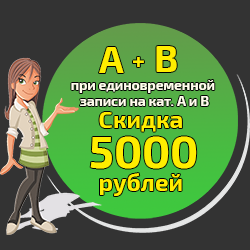
<style>
.page{position:relative;width:250px;height:250px;background:#333333}
.page>*{position:absolute;margin:0}
.t1{font:37.7px "Exo2-Bold";color:#ffed00}
.t2{font:24px "Exo2-Bold";color:#ffed00}
.t3{font:13.7px "Exo2-Bold";color:#fffeec}
.t4{font:44.6px "Exo2-Bold";color:#ffed00}
</style>
<div class="page">
<p class="t1" style="left:99px;top:47px;width:25px;height:26px">A</p>
<p class="t1" style="left:156px;top:46px;width:21px;height:26px">B</p>
<p class="t2" style="left:133px;top:57px;width:11px;height:10px">+</p>
<p class="t3" style="left:71px;top:80px;width:144px;height:26px">при единовременной<br>   записи на кат. А и B</p>
<p class="t2" style="left:99px;top:112px;width:83px;height:20px">Скидка</p>
<p class="t4" style="left:90px;top:136px;width:107px;height:33px">5000</p>
<p class="t2" style="left:100px;top:173px;width:82px;height:23px">рублей</p>
</div>
